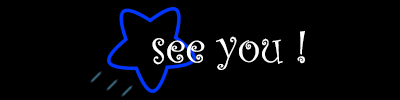
<style>
.page{position:relative;width:400px;height:100px;background:#000000}
.page>*{position:absolute;margin:0}
.t1{font:48px "CurlzMT";letter-spacing:-0.01em;color:#ffffff}
</style>
<div class="page">
<p class="t1" style="left:152px;top:31px;width:153px;height:39px">see you !</p>
</div>
